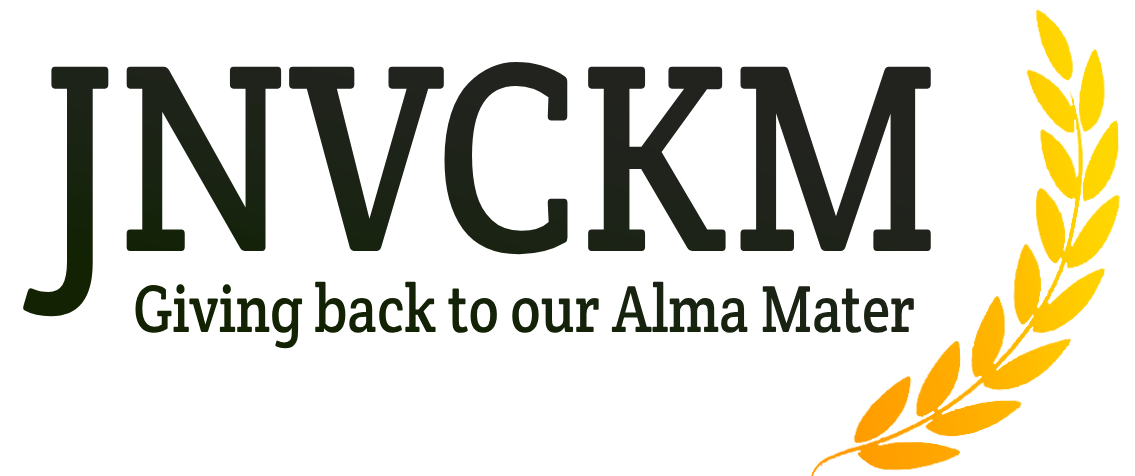
<style>
.page{position:relative;width:1135px;height:476px;background:#ffffff}
.page>*{position:absolute;margin:0}
.t1{font:67.4px "CreteRound-Regular";color:#141212;scale:0.85 1}
.t2{font:271.5px "CreteRound-Regular";color:#141212;scale:0.85 1}
</style>
<div class="page">
<p class="t1" style="left:23px;top:62px;width:908px;height:287px"><span class="t2">JNVCKM<br>           </span>Giving back to our Alma Mater</p>
</div>
